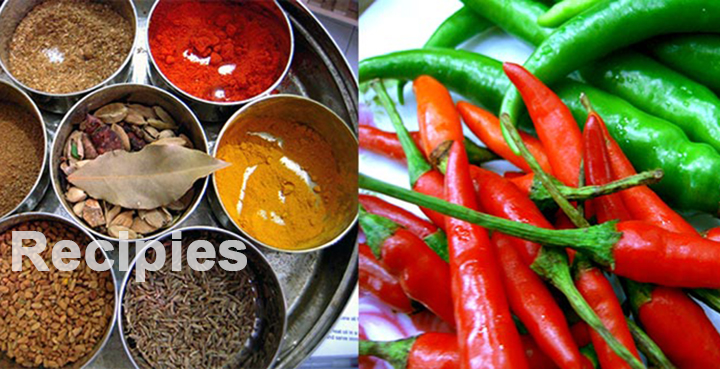
<style>
.page{position:relative;width:720px;height:369px}
.page>*{position:absolute;margin:0}
.t1{font:54px "Arial-BoldMT";color:#c3bebc;font-weight:bold;scale:1.03 1}
</style>
<div class="page">
<p class="t1" style="left:12px;top:231px;width:235px;height:51px">Recipies</p>
</div>
